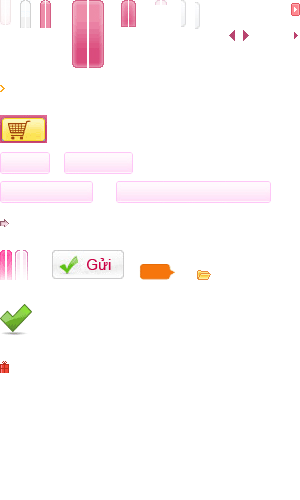
<style>
.page{position:relative;width:300px;height:500px;background:#ffffff}
.page>*{position:absolute;margin:0}
.t1{font:15px "ArialMT";color:#cb0044}
</style>
<div class="page">
<p class="t1" style="left:87px;top:258px;width:24px;height:12px">Gửi</p>
</div>
